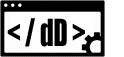
<style>
.page{position:relative;width:124px;height:57px;background:#ffffff}
.page>*{position:absolute;margin:0}
.t1{font:34.5px "Impact";color:#000000;scale:0.75 1}
</style>
<div class="page">
<p class="t1" style="left:7px;top:18px;width:78px;height:29px">&lt; / dD &gt;</p>
</div>
